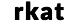
<style>
.page{position:relative;width:78px;height:22px;background:#ffffff}
.page>*{position:absolute;margin:0}
.t1{font:24px "Lato-Black";letter-spacing:0.08em;color:#000000}
</style>
<div class="page">
<p class="t1" style="left:14px;top:1px;width:50px;height:20px">rkat</p>
</div>
